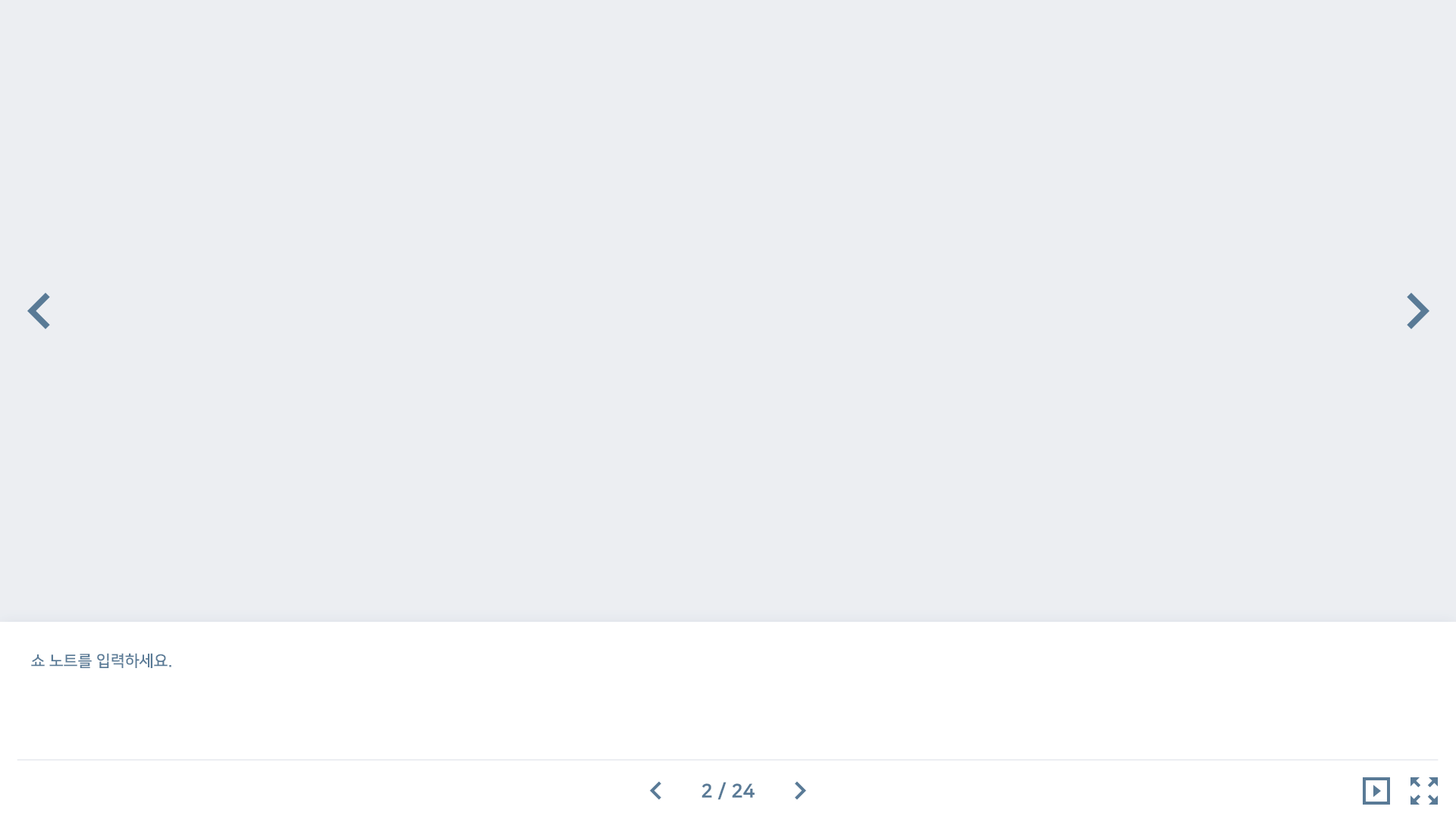
<style>
.page{position:relative;width:1456px;height:819px;background:#eceef2}
.page>*{position:absolute;margin:0}
.t1{font:15.8px "NanumSquareB";color:#597a96}
.t2{font:19px "NanumSquareEB";color:#597a96}
</style>
<div class="page">
<p class="t1" style="left:31px;top:653px;width:140px;height:15px">쇼 노트를 입력하세요.</p>
<p class="t2" style="left:701px;top:782px;width:54px;height:18px">2 / 24</p>
</div>
